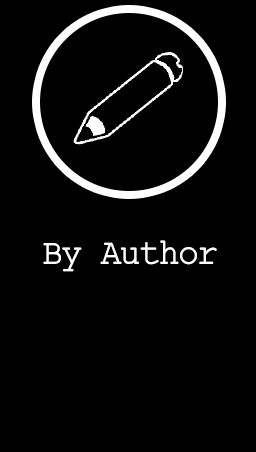
<style>
.page{position:relative;width:256px;height:452px;background:#000000}
.page>*{position:absolute;margin:0}
.t1{font:36.7px "CourierFinalDraft";letter-spacing:-0.04em;color:#ffffff;scale:0.95 1}
</style>
<div class="page">
<p class="t1" style="left:43px;top:240px;width:174px;height:32px">By Author</p>
</div>
